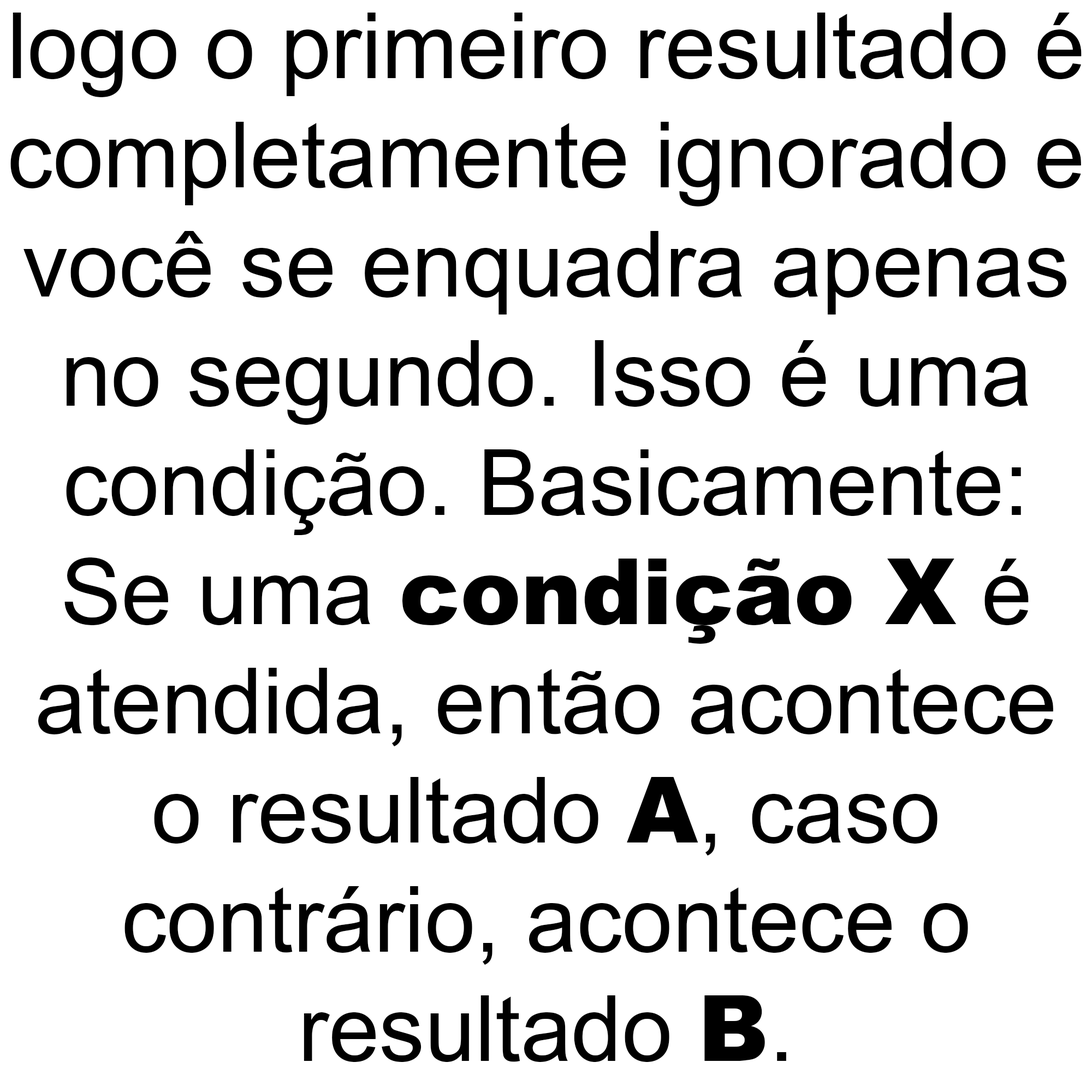
<style>
.page{position:relative;width:1092px;height:1092px;background:#ffffff}
.page>*{position:absolute;margin:0}
.t1{font:91px "ArialMT";color:#000000}
.t2{font:91px "Arial-Black";color:#000000}
</style>
<div class="page">
<p class="t1" style="left:10px;top:13px;width:1072px;height:1049px;text-align:center">logo o primeiro resultado é<br>completamente ignorado e<br>você se enquadra apenas<br>no segundo. Isso é uma<br>condição. Basicamente:<br>Se uma <span class="t2">condição X</span> é<br>atendida, então acontece<br>o resultado <span class="t2">A</span>, caso<br>contrário, acontece o<br>resultado <span class="t2">B</span>.</p>
</div>
